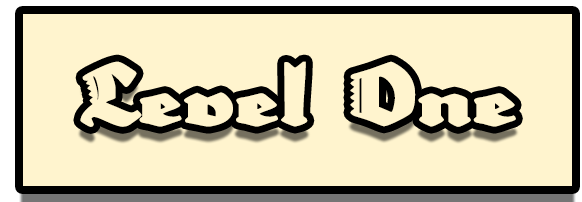
<style>
.page{position:relative;width:582px;height:202px;background:#fff4ce}
.page>*{position:absolute;margin:0}
.t1{font:79.9px "Neptun";color:#fff4ce}
</style>
<div class="page">
<p class="t1" style="left:80px;top:61px;width:436px;height:66px">Level One</p>
</div>
